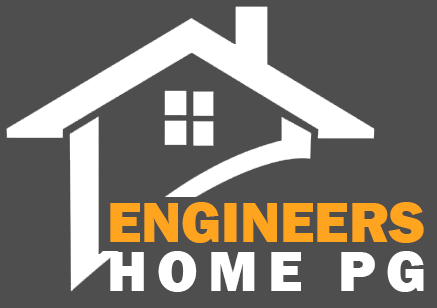
<style>
.page{position:relative;width:437px;height:308px;background:#4e4e4e}
.page>*{position:absolute;margin:0}
.t1{font:58.6px/49.4px "FranklinGothic-Heavy";color:#ffa41f}
.t2{font:58.6px/49.4px "FranklinGothic-Heavy";letter-spacing:0.18em;color:#ffffff}
</style>
<div class="page">
<p class="t1" style="left:110px;top:202px;width:314px;height:90px">ENGINEERS<br><span class="t2">HOME PG</span></p>
</div>
